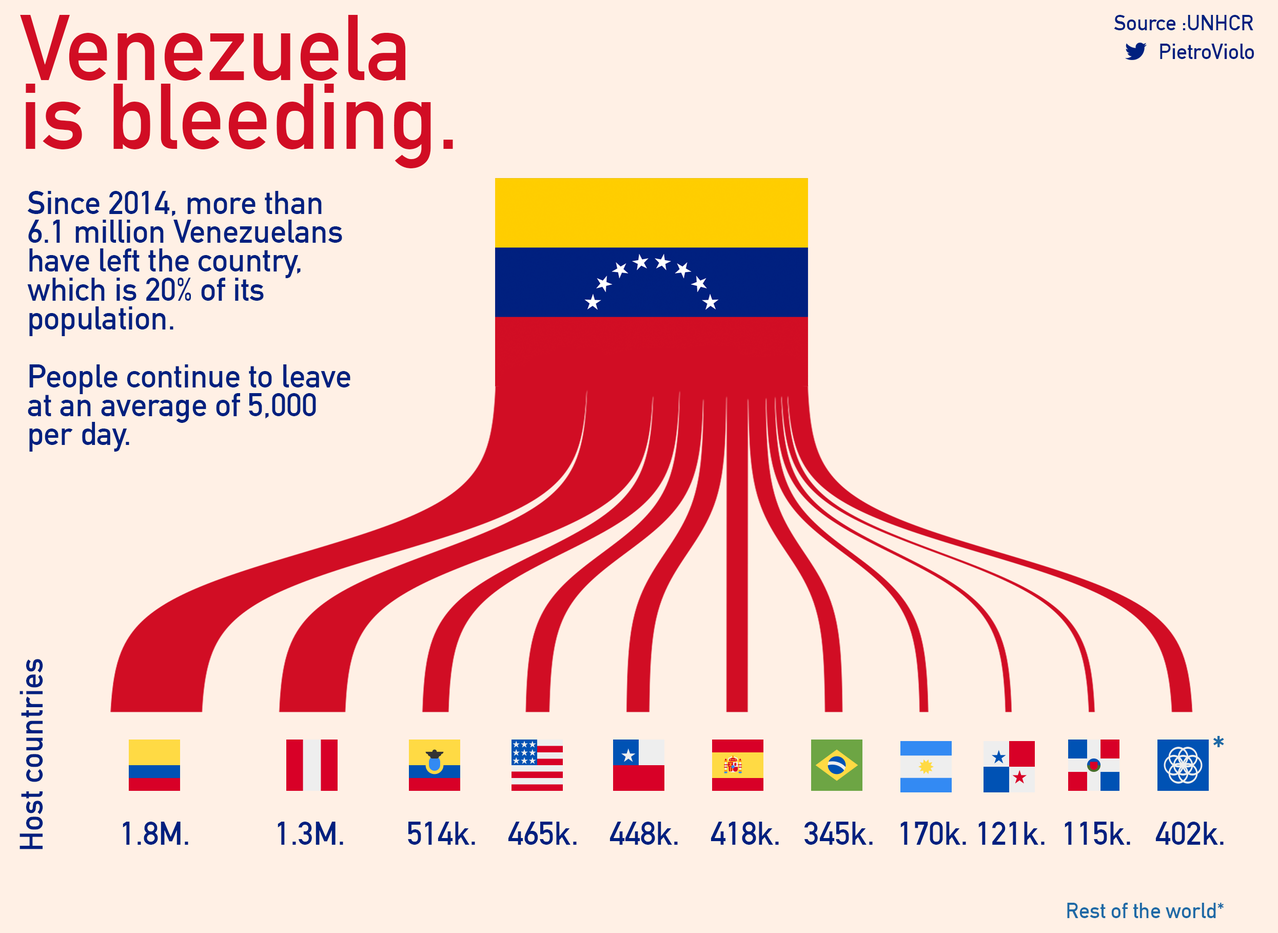
<style>
.page{position:relative;width:1278px;height:933px;background:#fff0e5}
.page>*{position:absolute;margin:0}
.t1{font:32.1px "DINAlternate-Bold";color:#00207f}
.t2{font:91.8px "DINAlternate-Bold";color:#d10d24}
.t3{font:21.4px "DINAlternate-Bold";color:#00207f}
.t4{font:38.5px "DINAlternate-Bold";color:#1e6aa6}
.t5{font:21.4px "DINAlternate-Bold";color:#1e6aa6}
</style>
<div class="page">
<p class="t1" style="left:20px;top:15px;width:433px;height:437px"><span class="t2">Venezuela<br>is bleeding.<br><br><br><br></span> Since 2014, more than<br> 6.1 million Venezuelans <br> have left the country,<br> which is 20% of its <br> population.<br><br> People continue to leave<br> at an average of 5,000<br> per day.</p>
<p class="t3" style="left:1114px;top:15px;width:140px;height:15px">Source :UNHCR</p>
<p class="t3" style="left:1160px;top:44px;width:94px;height:15px">PietroViolo</p>
<p class="t1" style="left:19px;top:659px;width:24px;height:190px;rotate:-90deg">Host countries</p>
<p class="t4" style="left:1213px;top:736px;width:11px;height:11px">*</p>
<p class="t1" style="left:123px;top:822px;width:1101px;height:23px">1.8M.           1.3M.        514k.    465k.    448k.    418k.   345k.   170k. 121k.  115k.   402k.</p>
<p class="t5" style="left:1067px;top:903px;width:157px;height:15px">Rest of the world*</p>
</div>
